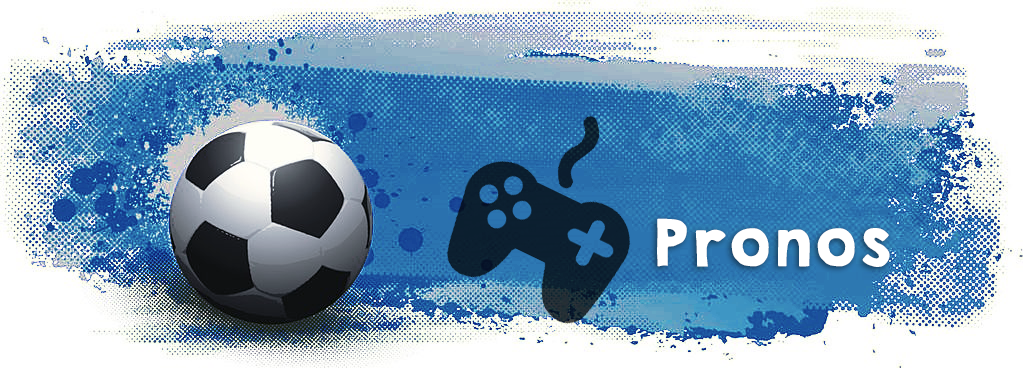
<style>
.page{position:relative;width:1023px;height:368px}
.page>*{position:absolute;margin:0}
.t1{font:58.3px "KGHAPPYSolid";color:#ffffff}
</style>
<div class="page">
<p class="t1" style="left:657px;top:218px;width:233px;height:49px">Pronos</p>
</div>
